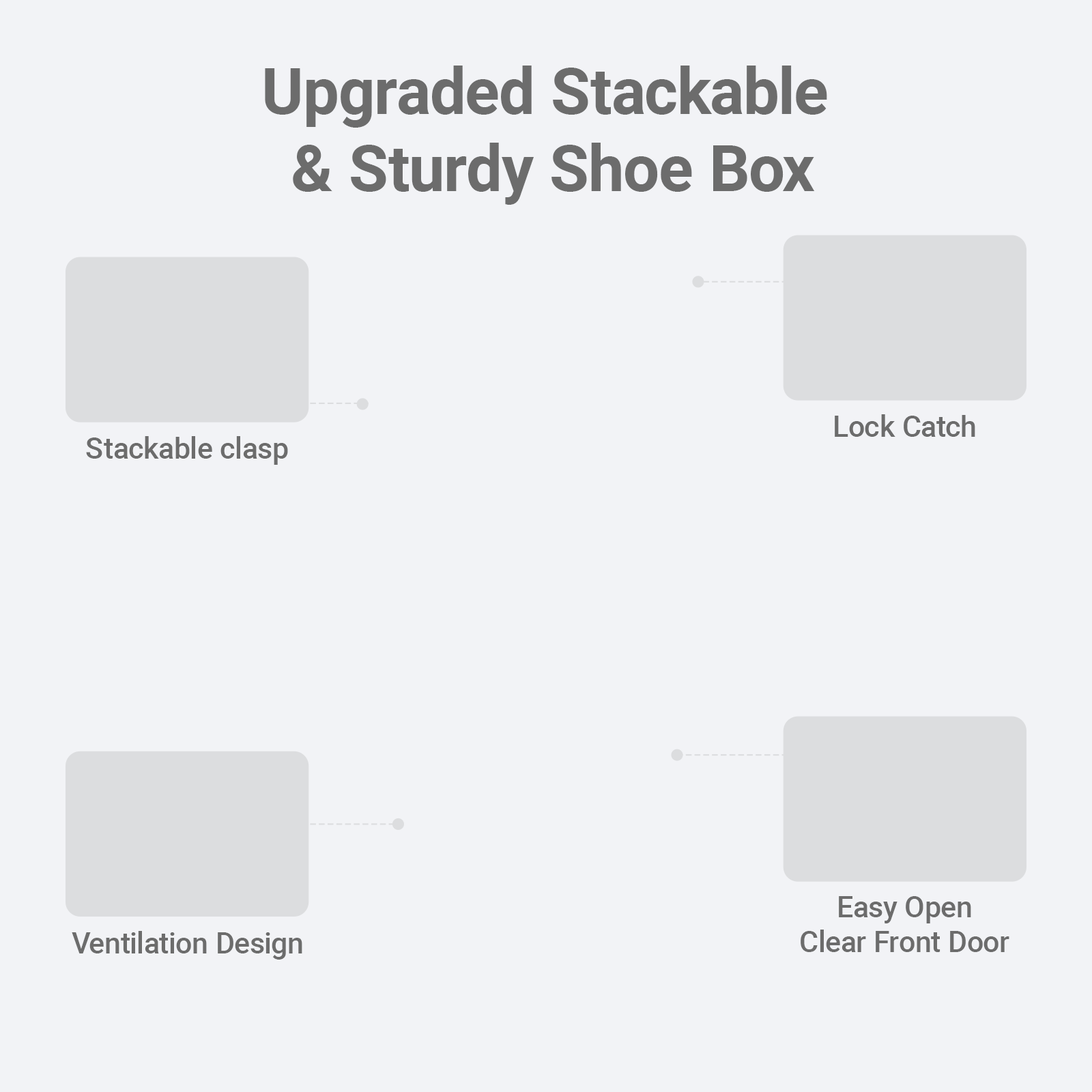
<style>
.page{position:relative;width:1092px;height:1092px;background:#f2f3f6}
.page>*{position:absolute;margin:0}
.t1{font:64.1px "Roboto-Bold";color:#6c6c6c}
.t2{font:29.1px "Roboto-Medium";color:#6c6c6c}
</style>
<div class="page">
<p class="t1" style="left:265px;top:66px;width:562px;height:139px;text-align:center">Upgraded Stackable <br>&amp; Sturdy Shoe Box</p>
<p class="t2" style="left:835px;top:414px;width:140px;height:23px">Lock Catch</p>
<p class="t2" style="left:86px;top:436px;width:202px;height:29px">Stackable clasp</p>
<p class="t2" style="left:801px;top:896px;width:208px;height:56px;text-align:center">Easy Open<br>Clear Front Door</p>
<p class="t2" style="left:72px;top:931px;width:230px;height:29px">Ventilation Design</p>
</div>
